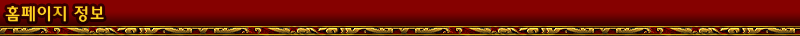
<style>
.page{position:relative;width:800px;height:36px;background:#860100}
.page>*{position:absolute;margin:0}
.t1{font:18px "2002L";letter-spacing:0.025em;color:#f8c619}
</style>
<div class="page">
<p class="t1" style="left:5px;top:5px;width:99px;height:17px">홈페이지 정보</p>
</div>
